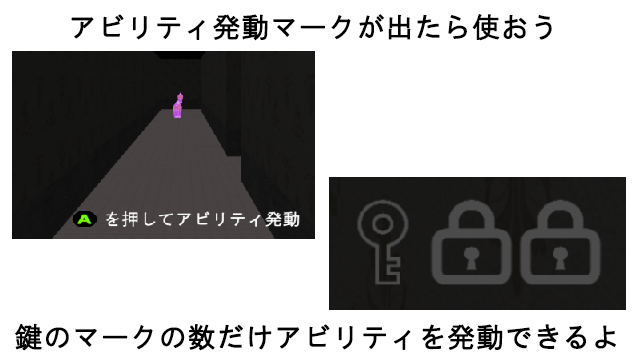
<style>
.page{position:relative;width:640px;height:360px;background:#ffffff}
.page>*{position:absolute;margin:0}
.t1{font:28.1px "HGGothicM";color:#000000;font-weight:bold}
</style>
<div class="page">
<p class="t1" style="left:71px;top:14px;width:481px;height:27px">アビリティ発動マークが出たら使おう</p>
<p class="t1" style="left:15px;top:323px;width:601px;height:28px">鍵のマークの数だけアビリティを発動できるよ</p>
</div>
